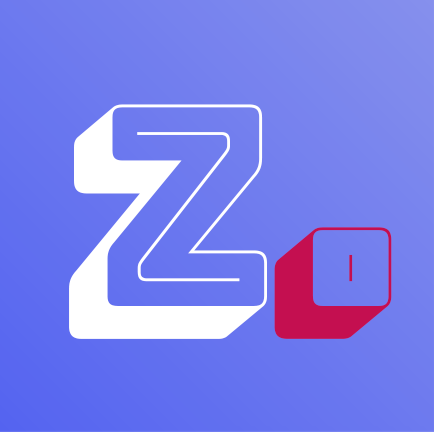
<style>
.page{position:relative;width:434px;height:432px}
.page>*{position:absolute;margin:0}
.t1{font:276px "BungeeShade-Regular";letter-spacing:-0.025em;color:#ffffff}
.t2{font:276px "BungeeShade-Regular";letter-spacing:-0.025em;color:#c40f50}
</style>
<div class="page">
<p class="t1" style="left:69px;top:104px;width:323px;height:235px">Z<span class="t2">.</span></p>
</div>
